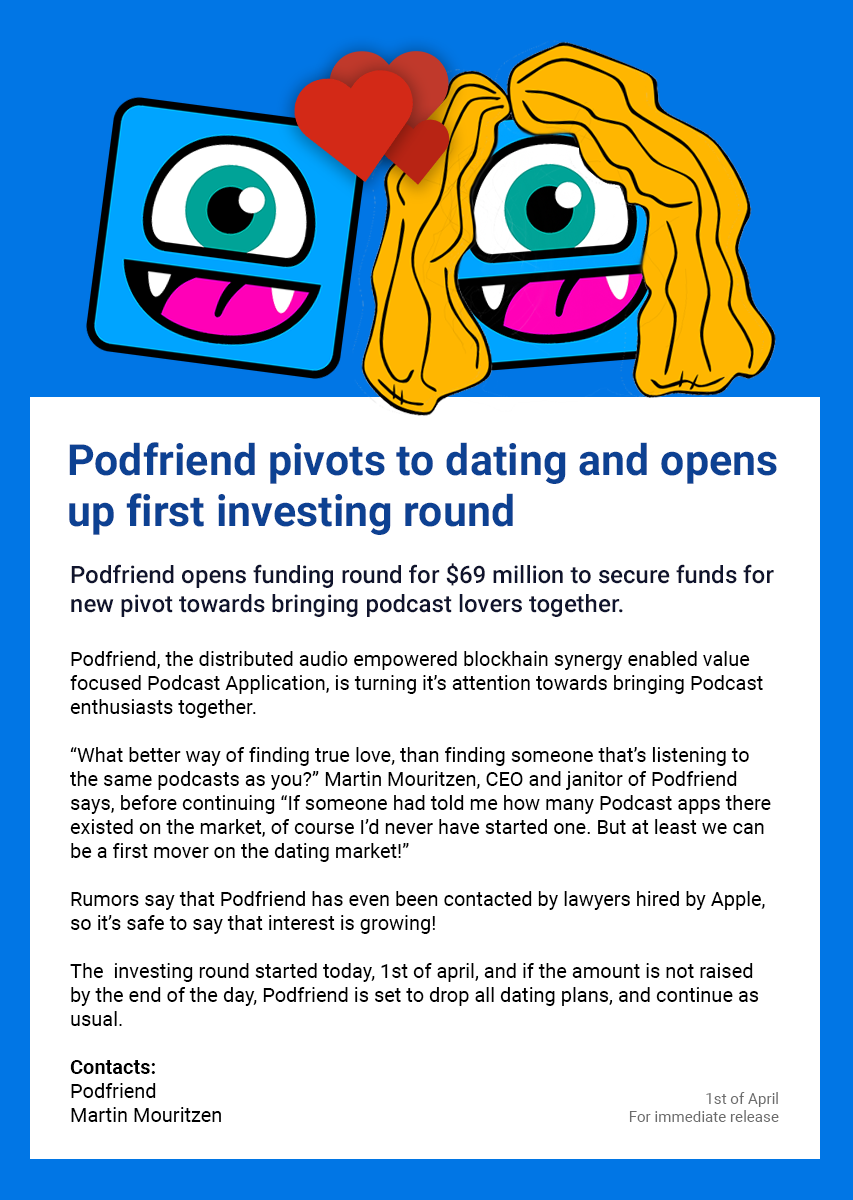
<style>
.page{position:relative;width:853px;height:1200px;background:#ffffff}
.page>*{position:absolute;margin:0}
.t1{font:43px "Roboto-Bold";color:#0d4192}
.t2{font:24px "Roboto-Medium";color:#10142d}
.t3{font:20px "Roboto-Regular";color:#000000}
.t4{font:20px "Roboto-Bold";color:#000000}
.t5{font:15.2px "Roboto-Regular";color:#6c6c6c}
</style>
<div class="page">
<p class="t1" style="left:69px;top:442px;width:708px;height:93px">Podfriend pivots to dating and opens<br>up first investing round</p>
<p class="t2" style="left:71px;top:563px;width:703px;height:54px">Podfriend opens funding round for $69 million to secure funds for new pivot towards bringing podcast lovers together.</p>
<p class="t3" style="left:70px;top:651px;width:701px;height:471px">Podfriend, the distributed audio empowered blockhain synergy enabled value focused Podcast Application, is turning it’s attention towards bringing Podcast enthusiasts together.<br><br>“What better way of finding true love, than finding someone that’s listening to the same podcasts as you?” Martin Mouritzen, CEO and janitor of Podfriend says, before continuing “If someone had told me how many Podcast apps there existed on the market, of course I’d never have started one. But at least we can be a first mover on the dating market!”<br><br>Rumors say that Podfriend has even been contacted by lawyers hired by Apple, so it’s safe to say that interest is growing!<br><br>The  investing round started today, 1st of april, and if the amount is not raised by the end of the day, Podfriend is set to drop all dating plans, and continue as usual.<br><br><span class="t4">Contacts:<br></span>Podfriend<br>Martin Mouritzen<br>info@podfriend.com</p>
<p class="t5" style="left:629px;top:1092px;width:150px;height:30px;text-align:right">1st of April<br>For immediate release</p>
</div>
